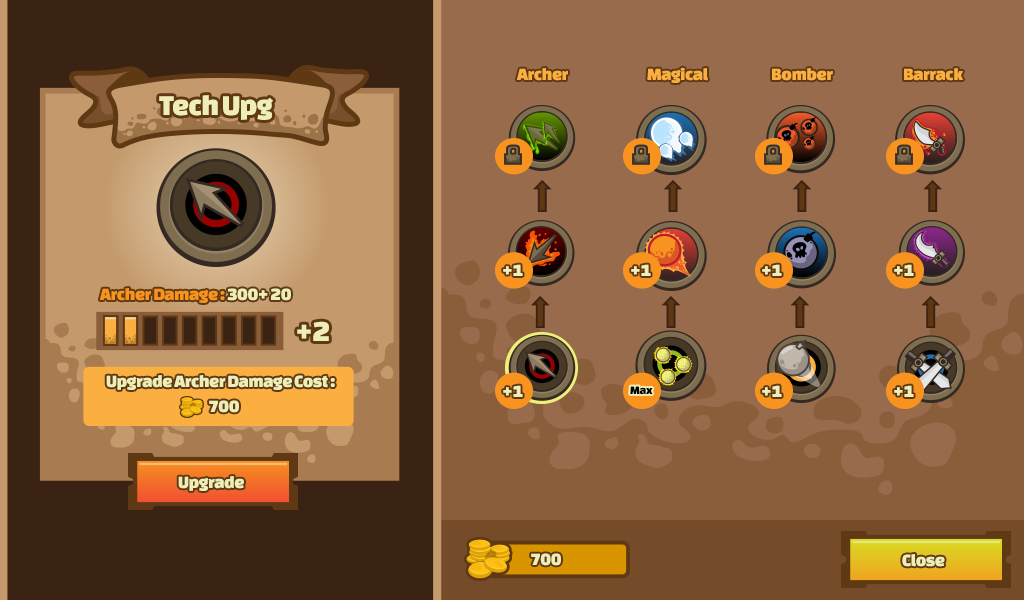
<style>
.page{position:relative;width:1024px;height:600px;background:#996b4d}
.page>*{position:absolute;margin:0}
.t1{font:18px "ChangaOne";letter-spacing:-0.025em;color:#faaf40}
.t2{font:30px "ChangaOne";letter-spacing:-0.025em;color:#eeeeb6}
.t3{font:18px "ChangaOne";letter-spacing:-0.025em;color:#eeeeb6}
.t4{font:18px "ChangaOne";letter-spacing:-0.025em;color:#f7931e}
.t5{font:12px "ChangaOne";letter-spacing:-0.025em;color:#000000}
</style>
<div class="page">
<p class="t1" style="left:516px;top:68px;width:52px;height:13px">Archer</p>
<p class="t1" style="left:647px;top:67px;width:61px;height:16px">Magical</p>
<p class="t1" style="left:772px;top:68px;width:61px;height:13px">Bomber</p>
<p class="t1" style="left:904px;top:68px;width:60px;height:13px">Barrack</p>
<p class="t2" style="left:159px;top:95px;width:114px;height:25px">Tech Upg</p>
<p class="t3" style="left:503px;top:264px;width:20px;height:12px">+1</p>
<p class="t3" style="left:631px;top:264px;width:20px;height:12px">+1</p>
<p class="t3" style="left:762px;top:264px;width:20px;height:12px">+1</p>
<p class="t3" style="left:894px;top:264px;width:20px;height:12px">+1</p>
<p class="t4" style="left:99px;top:288px;width:192px;height:15px">Archer Damage : <span class="t3">300+ 20</span></p>
<p class="t2" style="left:297px;top:321px;width:32px;height:20px">+2</p>
<p class="t3" style="left:106px;top:375px;width:229px;height:15px">Upgrade Archer Damage Cost :</p>
<p class="t3" style="left:503px;top:385px;width:20px;height:12px">+1</p>
<p class="t5" style="left:630px;top:386px;width:23px;height:9px">Max</p>
<p class="t3" style="left:762px;top:385px;width:20px;height:12px">+1</p>
<p class="t3" style="left:894px;top:385px;width:20px;height:12px">+1</p>
<p class="t3" style="left:209px;top:400px;width:30px;height:13px">700</p>
<p class="t3" style="left:178px;top:476px;width:66px;height:15px">Upgrade</p>
<p class="t3" style="left:531px;top:553px;width:30px;height:13px">700</p>
<p class="t3" style="left:902px;top:554px;width:43px;height:13px">Close</p>
</div>
